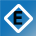
<style>
.page{position:relative;width:36px;height:36px}
.page>*{position:absolute;margin:0}
.t1{font:18.6px "BitstreamVeraSansMono-Bold";color:#010508}
</style>
<div class="page">
<p class="t1" style="left:13px;top:11px;width:10px;height:14px">E</p>
</div>
